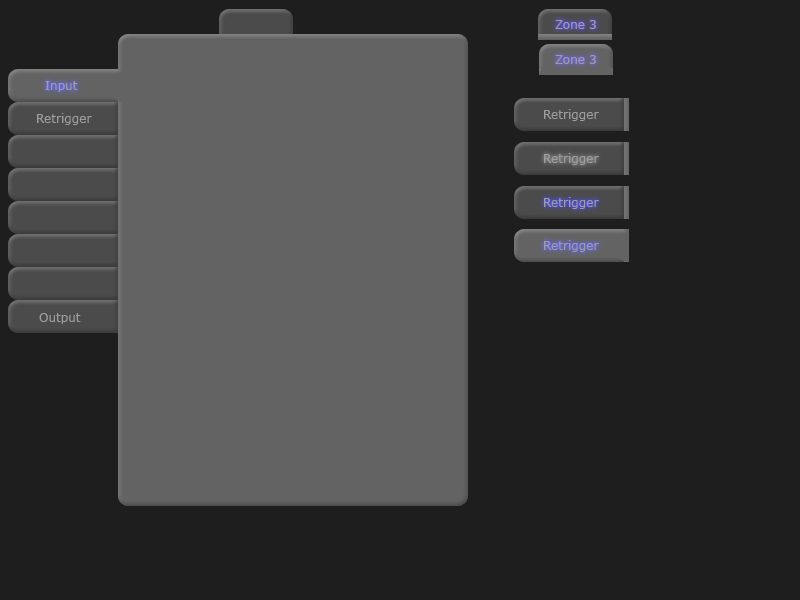
<style>
.page{position:relative;width:800px;height:600px;background:#1e1e1e}
.page>*{position:absolute;margin:0}
.t1{font:12px "Verdana";color:#9e9e9e}
</style>
<div class="page">
<p class="t1" style="left:555px;top:20px;width:41px;height:9px">Zone 3</p>
<p class="t1" style="left:555px;top:55px;width:41px;height:9px">Zone 3</p>
<p class="t1" style="left:45px;top:81px;width:33px;height:11px">Input</p>
<p class="t1" style="left:37px;top:113px;width:55px;height:12px">Retrigger</p>
<p class="t1" style="left:544px;top:109px;width:55px;height:12px">Retrigger</p>
<p class="t1" style="left:544px;top:153px;width:55px;height:12px">Retrigger</p>
<p class="t1" style="left:544px;top:197px;width:55px;height:12px">Retrigger</p>
<p class="t1" style="left:544px;top:240px;width:55px;height:12px">Retrigger</p>
<p class="t1" style="left:39px;top:313px;width:42px;height:11px">Output</p>
</div>
